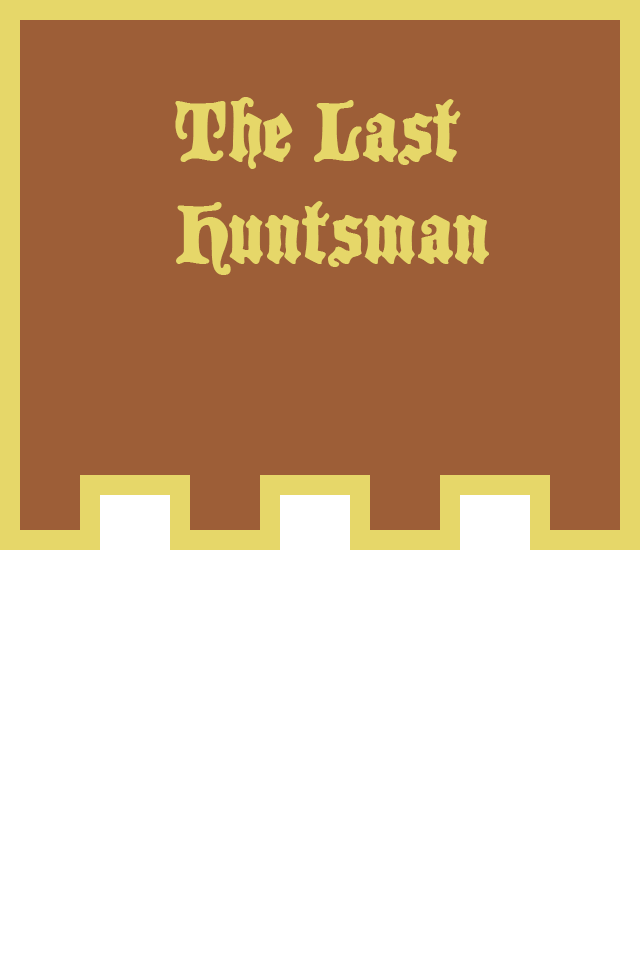
<style>
.page{position:relative;width:640px;height:960px;background:#ffffff}
.page>*{position:absolute;margin:0}
.t1{font:85px "BlackCastleMF";color:#e6d769}
</style>
<div class="page">
<p class="t1" style="left:175px;top:97px;width:314px;height:178px">The Last <br>Huntsman</p>
</div>
